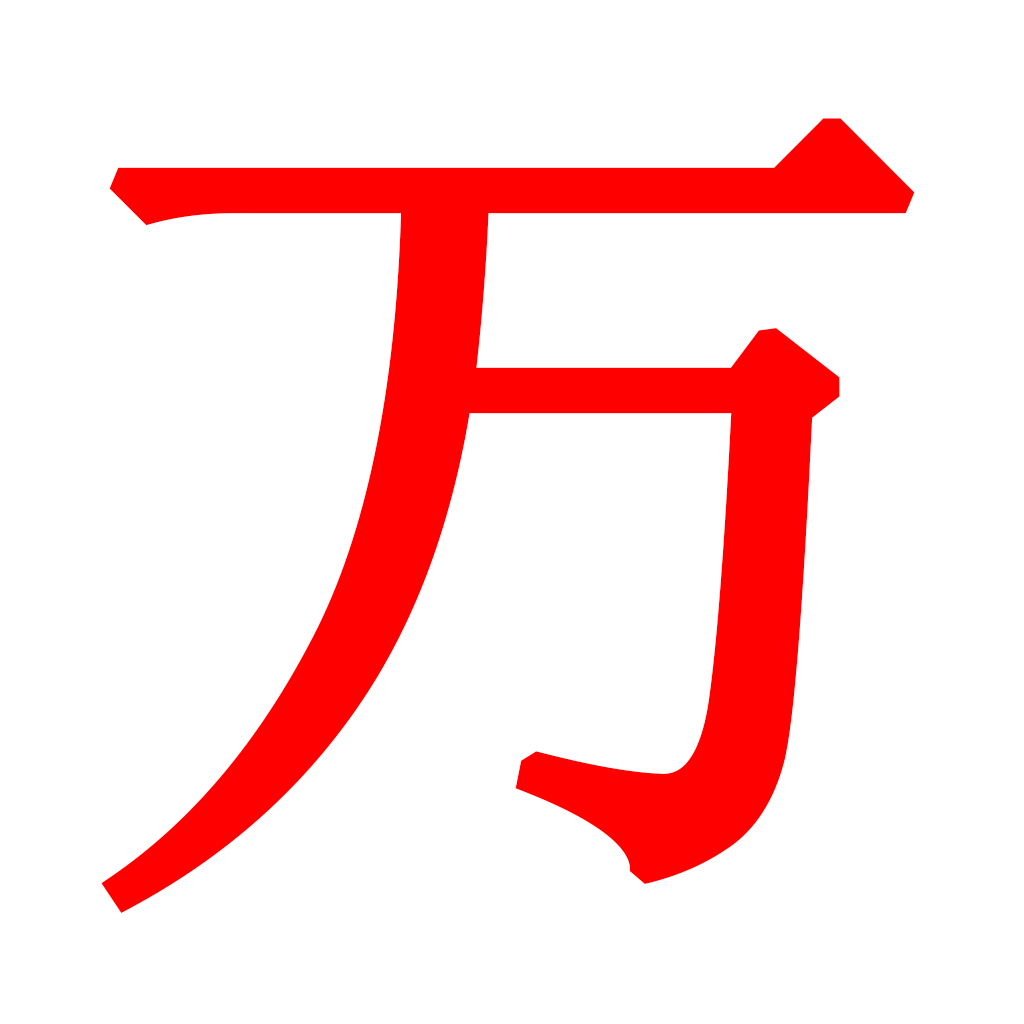
<style>
.page{position:relative;width:1024px;height:1024px;background:#ffffff}
.page>*{position:absolute;margin:0}
.t1{font:900px "SimSun";color:#ff0000;font-weight:bold}
</style>
<div class="page">
<p class="t1" style="left:101px;top:118px;width:814px;height:795px">万</p>
</div>
